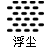
<style>
.page{position:relative;width:50px;height:48px;background:#ffffff}
.page>*{position:absolute;margin:0}
.t1{font:12px "OPPOSans-R";color:#000000}
</style>
<div class="page">
<p class="t1" style="left:13px;top:36px;width:23px;height:11px">浮尘</p>
</div>
